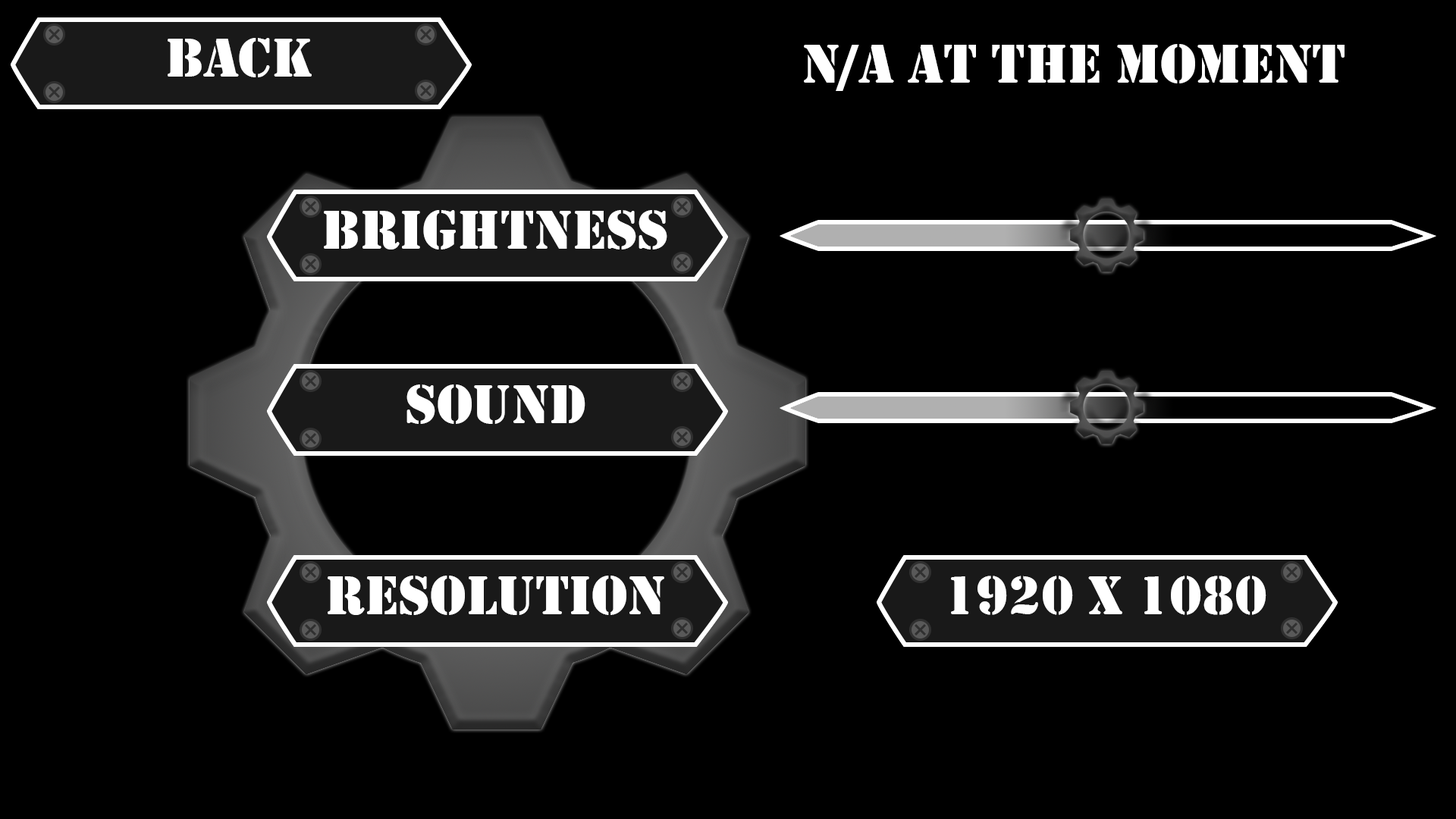
<style>
.page{position:relative;width:1456px;height:819px;background:#000000}
.page>*{position:absolute;margin:0}
.t1{font:56.9px "Stencil";color:#ffffff}
</style>
<div class="page">
<p class="t1" style="left:168px;top:38px;width:144px;height:39px">Back</p>
<p class="t1" style="left:804px;top:44px;width:541px;height:47px">N/A at the moment</p>
<p class="t1" style="left:324px;top:210px;width:343px;height:39px">Brightness</p>
<p class="t1" style="left:406px;top:384px;width:179px;height:40px">Sound</p>
<p class="t1" style="left:328px;top:576px;width:336px;height:39px">Resolution</p>
<p class="t1" style="left:951px;top:576px;width:315px;height:39px">1920 x 1080</p>
</div>
